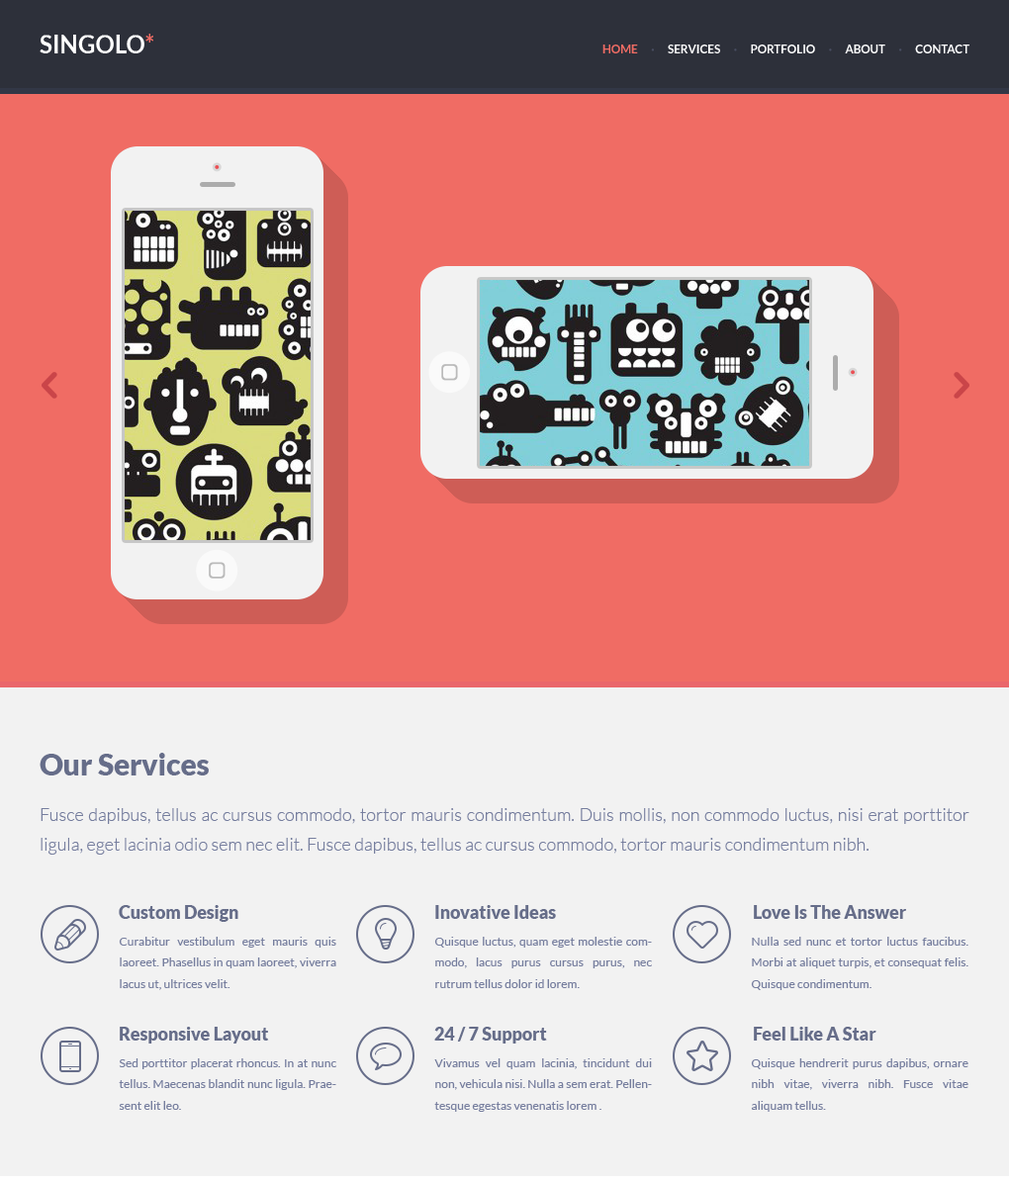
<style>
.page{position:relative;width:1009px;height:1182px;background:#f2f2f2}
.page>*{position:absolute;margin:0}
.t1{font:24.7px "Lato-Bold";color:#ffffff}
.t2{font:24.7px "Lato-Bold";color:#f06c64}
.t3{font:11.9px "Lato-Bold";color:#ffffff}
.t4{font:11.9px "Lato-Bold";color:#f06c64}
.t5{font:11.9px "Lato-Bold";color:#494e62}
.t6{font:29.7px "Lato-Black";color:#666d89}
.t7{font:17.8px/29.7px "Lato-Light";color:#767e9e}
.t8{font:17.8px "Lato-Black";color:#666d89}
.t9{font:11.9px/21.3px "Lato-Regular";color:#767e9e}
</style>
<div class="page">
<p class="t1" style="left:40px;top:34px;width:113px;height:19px">SINGOLO<span class="t2">*</span></p>
<p class="t3" style="left:602px;top:45px;width:367px;height:8px"><span class="t4">HOME      </span><span class="t5">·      </span>SERVICES      <span class="t5">·</span>      PORTFOLIO      <span class="t5">·</span>      ABOUT      <span class="t5">·</span>      CONTACT</p>
<p class="t6" style="left:40px;top:753px;width:169px;height:22px">Our Services</p>
<p class="t7" style="left:41px;top:808px;width:928px;height:47px;text-align:justify">Fusce dapibus, tellus ac cursus commodo, tortor mauris condimentum. Duis mollis, non commodo luctus, nisi erat porttitor ligula, eget lacinia odio sem nec elit. Fusce dapibus, tellus ac cursus commodo, tortor mauris condimentum nibh.</p>
<p class="t8" style="left:119px;top:905px;width:119px;height:17px">Custom Design</p>
<p class="t8" style="left:435px;top:905px;width:121px;height:14px">Inovative Ideas</p>
<p class="t8" style="left:754px;top:905px;width:152px;height:14px">Love Is The Answer</p>
<p class="t9" style="left:119px;top:937px;width:217px;height:53px;text-align:justify">Curabitur vestibulum eget mauris quis laoreet. Phasellus in quam laoreet, viverra lacus ut, ultrices velit.</p>
<p class="t9" style="left:434px;top:937px;width:218px;height:51px;text-align:justify">Quisque luctus, quam eget molestie commodo, lacus purus cursus purus, nec rutrum tellus dolor id lorem.</p>
<p class="t9" style="left:751px;top:937px;width:217px;height:53px;text-align:justify">Nulla sed nunc et tortor luctus faucibus. Morbi at aliquet turpis, et consequat felis. Quisque condimentum.</p>
<p class="t8" style="left:120px;top:1027px;width:149px;height:16px">Responsive Layout</p>
<p class="t8" style="left:434px;top:1027px;width:113px;height:16px">24 / 7 Support</p>
<p class="t8" style="left:754px;top:1027px;width:122px;height:14px">Feel Like A Star</p>
<p class="t9" style="left:119px;top:1058px;width:217px;height:52px;text-align:justify">Sed porttitor placerat rhoncus. In at nunc tellus. Maecenas blandit nunc ligula. Praesent elit leo.</p>
<p class="t9" style="left:434px;top:1058px;width:218px;height:54px;text-align:justify">Vivamus vel quam lacinia, tincidunt dui non, vehicula nisi. Nulla a sem erat. Pellentesque egestas venenatis lorem .</p>
<p class="t9" style="left:751px;top:1058px;width:217px;height:54px;text-align:justify">Quisque hendrerit purus dapibus, ornare nibh vitae, viverra nibh. Fusce vitae aliquam tellus.</p>
</div>
